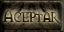
<style>
.page{position:relative;width:64px;height:32px}
.page>*{position:absolute;margin:0}
.t1{font:16px "Morpheus"}
</style>
<div class="page">
<p class="t1" style="left:2px;top:10px;width:60px;height:14px">Aceptar</p>
</div>
